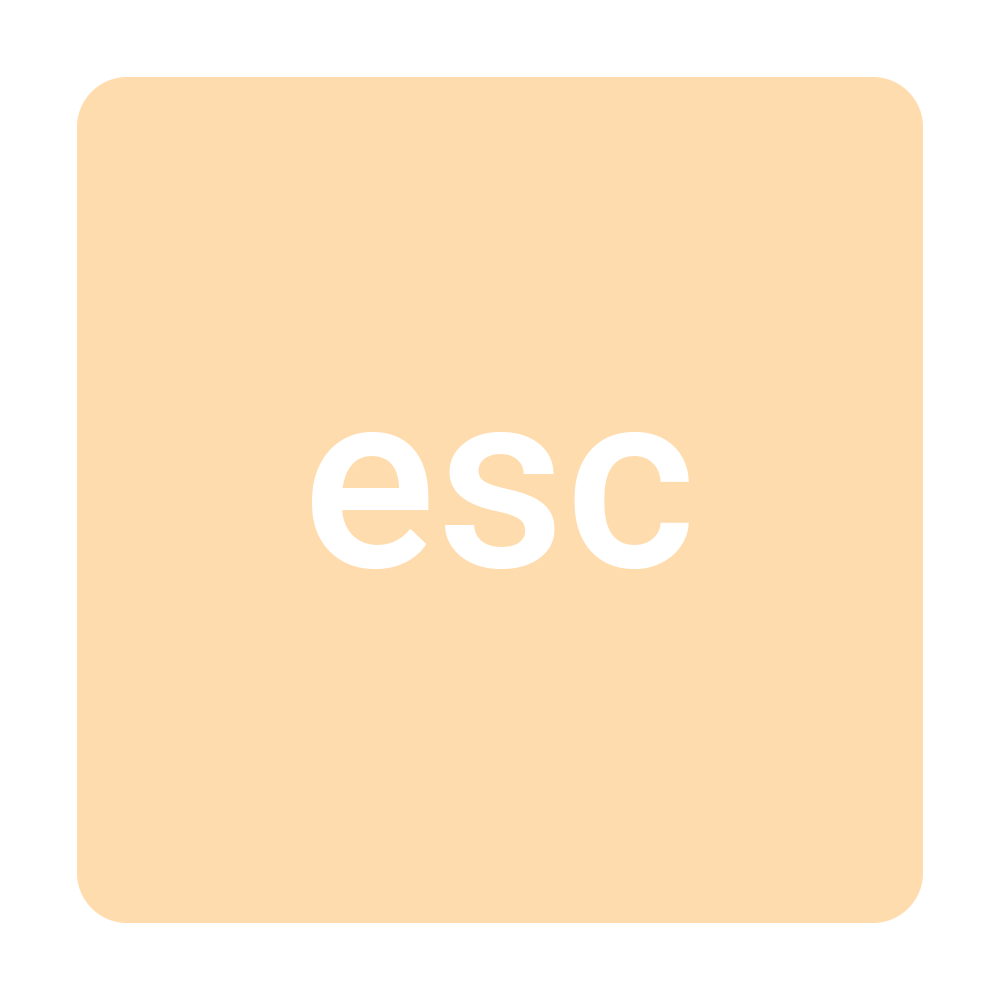
<style>
.page{position:relative;width:1000px;height:1000px;background:#ffdcad}
.page>*{position:absolute;margin:0}
.t1{font:250px "Roboto-Medium";color:#ffffff}
</style>
<div class="page">
<p class="t1" style="left:312px;top:432px;width:377px;height:137px">esc</p>
</div>
